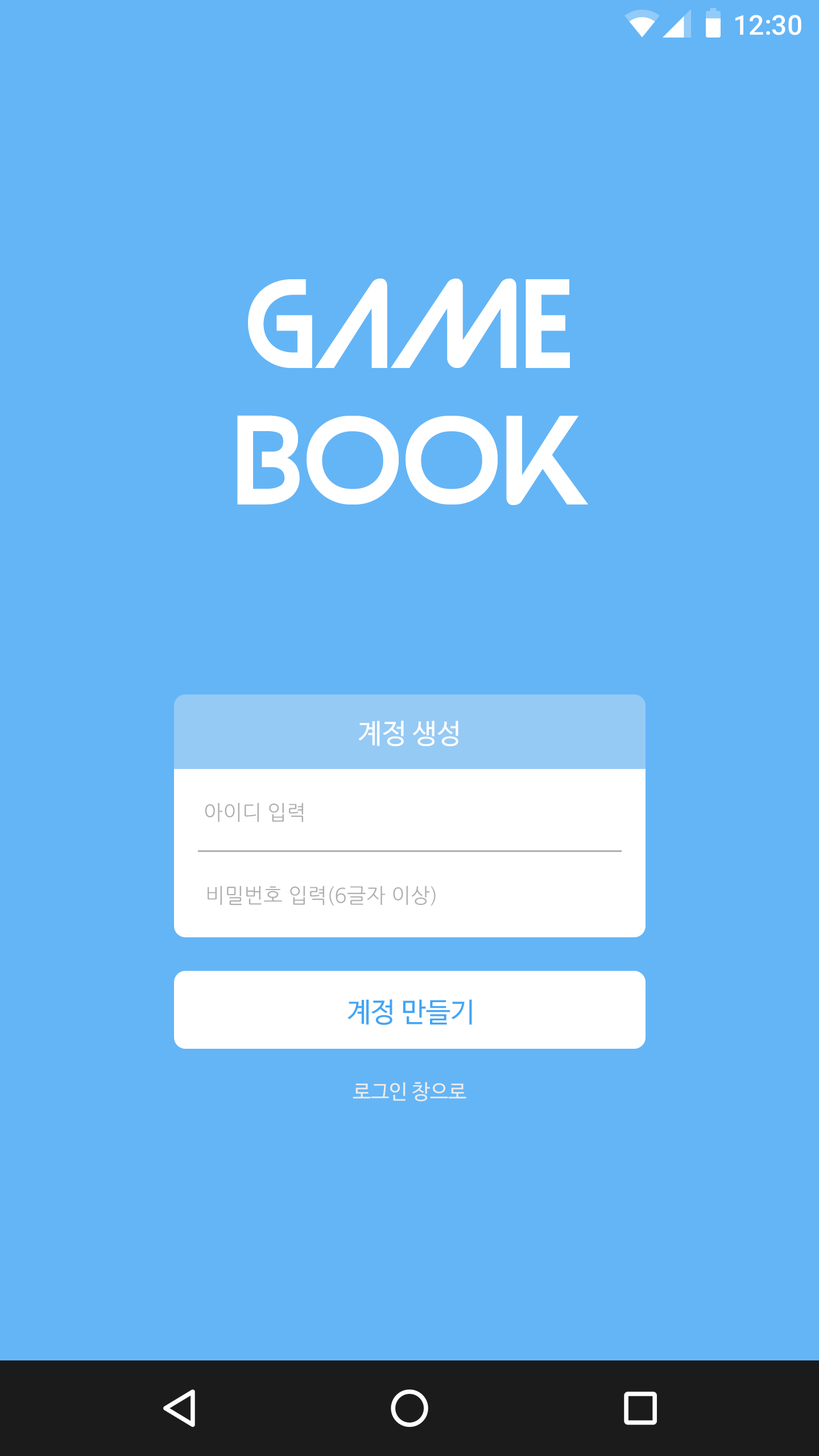
<style>
.page{position:relative;width:819px;height:1456px;background:#64b5f6}
.page>*{position:absolute;margin:0}
.t1{font:27.3px "Roboto-Medium";color:#ffffff}
.t2{font:113.7px "Strasua-Regular";color:#ffffff}
.t3{font:27.3px "NanumBarunGothic";color:#fefefe}
.t4{font:20.5px "NanumGothic";color:#afafaf}
.t5{font:27.3px "NanumBarunGothic";color:#42a5f5}
.t6{font:20.5px "NanumBarunGothic";color:#ebebeb}
</style>
<div class="page">
<p class="t1" style="left:735px;top:15px;width:66px;height:20px">12:30</p>
<p class="t2" style="left:237px;top:278px;width:351px;height:227px;text-align:center">GAME<br>BOOK</p>
<p class="t3" style="left:358px;top:721px;width:100px;height:25px">계정 생성</p>
<p class="t4" style="left:205px;top:802px;width:98px;height:20px">아이디 입력</p>
<p class="t4" style="left:208px;top:886px;width:228px;height:20px">비밀번호 입력(6글자 이상)</p>
<p class="t5" style="left:348px;top:999px;width:124px;height:26px">계정 만들기</p>
<p class="t6" style="left:353px;top:1082px;width:113px;height:20px">로그인 창으로</p>
</div>
